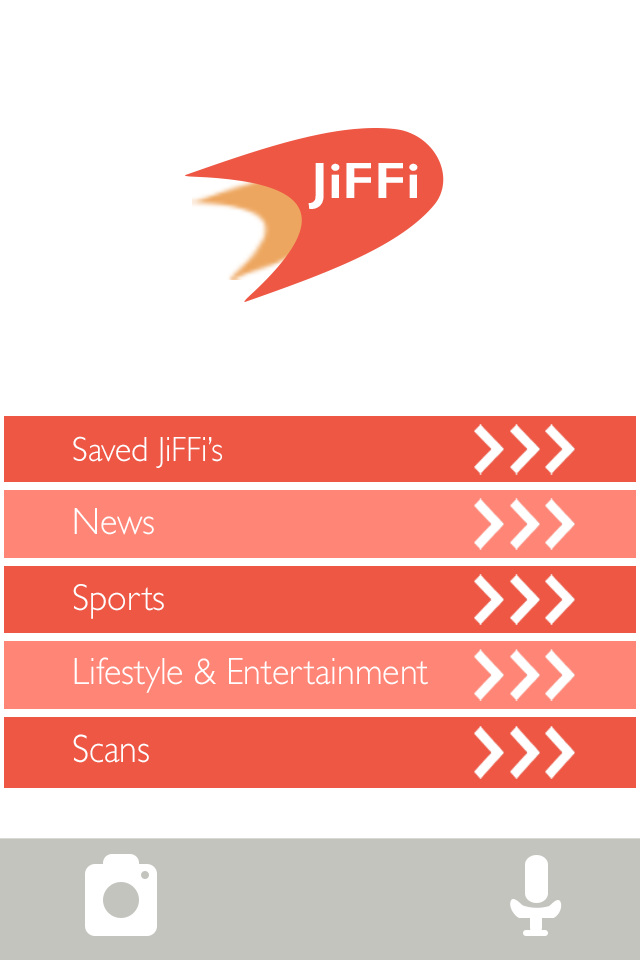
<style>
.page{position:relative;width:640px;height:960px;background:#ffffff}
.page>*{position:absolute;margin:0}
.t1{font:51.1px "GillSans-SemiBold";color:#fefefe;scale:1.16 1}
.t2{font:35.4px "GillSans-Light";color:#ffffff;scale:0.95 1}
.t3{font:38.4px "GillSans-Light";color:#ffffff;scale:0.94 1}
.t4{font:37.9px "GillSans-Light";color:#ffffff;scale:0.95 1}
.t5{font:39.8px "GillSans-Light";color:#ffffff;scale:0.9 1}
</style>
<div class="page">
<p class="t1" style="left:308px;top:163px;width:110px;height:46px">JiFFi</p>
<p class="t2" style="left:73px;top:436px;width:149px;height:32px">Saved JiFFi’s</p>
<p class="t3" style="left:74px;top:508px;width:80px;height:27px">News</p>
<p class="t4" style="left:73px;top:584px;width:91px;height:35px">Sports</p>
<p class="t3" style="left:74px;top:657px;width:354px;height:36px">Lifestyle &amp; Entertainment</p>
<p class="t5" style="left:73px;top:734px;width:76px;height:29px">Scans</p>
</div>
